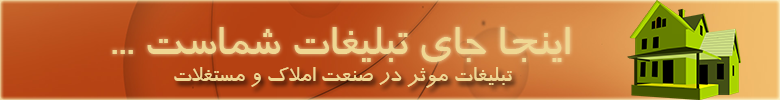
<style>
.page{position:relative;width:780px;height:100px}
.page>*{position:absolute;margin:0}
.t1{font:48px "BTraffic";color:#efd793}
.t2{font:24px "BTraffic";color:#efd793}
</style>
<div class="page">
<p class="t1" style="left:112px;top:27px;width:458px;height:35px">اینجا جای تبلیغات شماست ...</p>
<p class="t2" style="left:174px;top:67px;width:338px;height:21px">تبلیغات موثر در صنعت املاک و مستغلات</p>
</div>
